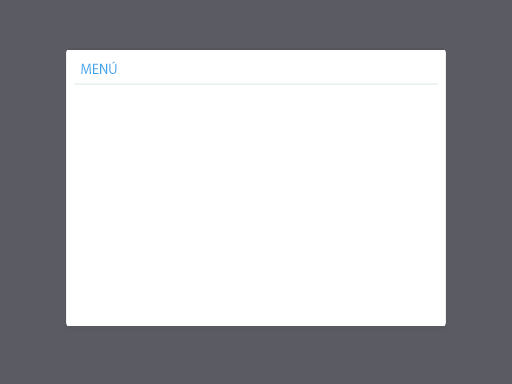
<style>
.page{position:relative;width:512px;height:384px;background:#ffffff}
.page>*{position:absolute;margin:0}
.t1{font:14.9px "MyriadPro-Regular";color:#3ca4ec;text-transform:uppercase;scale:0.95 1}
</style>
<div class="page">
<p class="t1" style="left:81px;top:61px;width:36px;height:13px">MENÚ</p>
</div>
